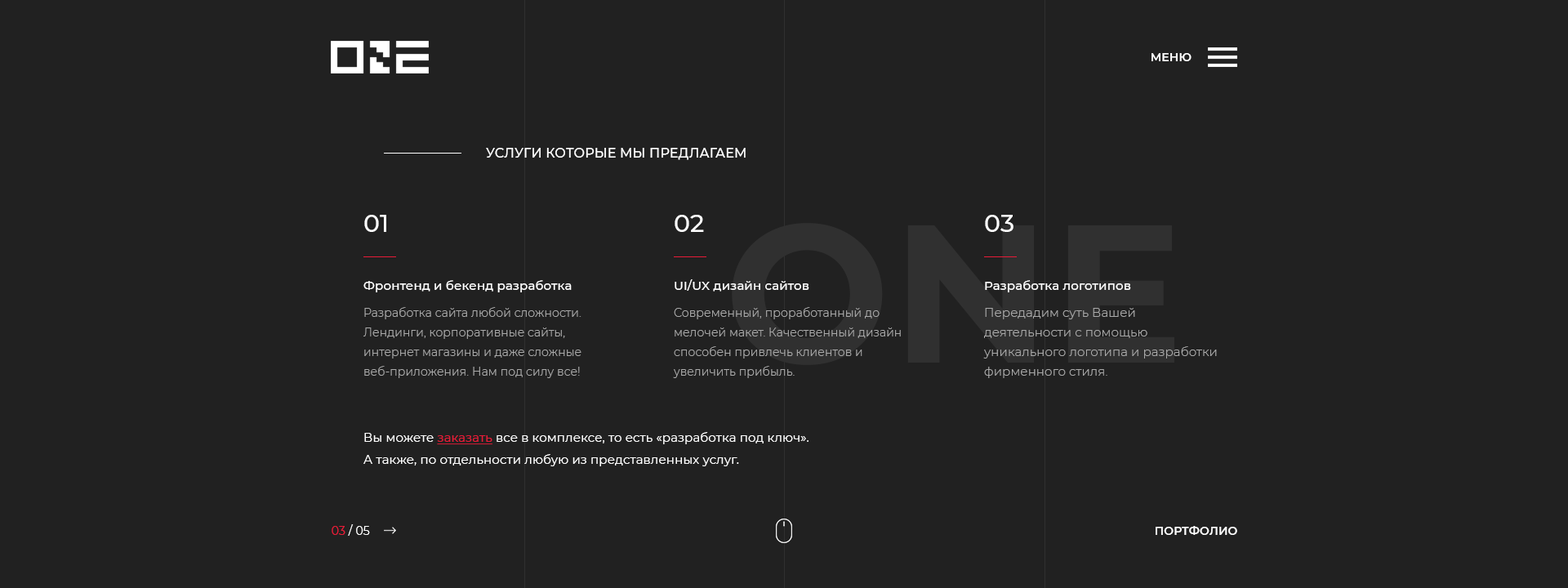
<style>
.page{position:relative;width:1568px;height:588px;background:#212121}
.page>*{position:absolute;margin:0}
.t1{font:11.4px "Montserrat-SemiBold";letter-spacing:0.01em;color:#ffffff}
.t2{font:13.1px "Montserrat-Medium";letter-spacing:0.01em;color:#ffffff}
.t3{font:24.5px "Montserrat-Medium";letter-spacing:0.01em;color:#ffffff}
.t4{font:12.2px "Montserrat-Medium";letter-spacing:0.01em;color:#ffffff}
.t5{font:11.4px/19.6px "Montserrat-Light";letter-spacing:0.01em;color:#ababab}
.t6{font:12.2px/19.6px "Montserrat-Light";letter-spacing:0.01em;color:#ababab}
.t7{font:12.2px/22.1px "Montserrat-Regular";letter-spacing:0.01em;color:#ffffff}
.t8{font:12.2px/22.1px "Montserrat-Regular";letter-spacing:0.01em;color:#e91b38;text-decoration:underline}
.t9{font:11.4px "Montserrat-Regular";letter-spacing:0.01em;color:#ffffff}
.t10{font:11.4px "Montserrat-Regular";letter-spacing:0.01em;color:#e91b38}
</style>
<div class="page">
<p class="t1" style="left:1152px;top:53px;width:40px;height:8px">МЕНЮ</p>
<p class="t2" style="left:486px;top:148px;width:260px;height:12px">УСЛУГИ КОТОРЫЕ МЫ ПРЕДЛАГАЕМ</p>
<p class="t3" style="left:364px;top:215px;width:22px;height:17px">01</p>
<p class="t3" style="left:675px;top:215px;width:29px;height:17px">02</p>
<p class="t3" style="left:985px;top:215px;width:28px;height:17px">03</p>
<p class="t4" style="left:363px;top:280px;width:209px;height:12px">Фронтенд и бекенд разработка</p>
<p class="t4" style="left:675px;top:279px;width:134px;height:13px">UI/UX дизайн сайтов</p>
<p class="t4" style="left:985px;top:280px;width:146px;height:12px">Разработка логотипов</p>
<p class="t5" style="left:363px;top:307px;width:218px;height:71px">Разработка сайта любой сложности. Лендинги, корпоративные сайты, интернет магазины и даже сложные веб-приложения. Нам под силу все!</p>
<p class="t5" style="left:673px;top:307px;width:228px;height:71px">Современный, проработанный до мелочей макет. Качественный дизайн способен привлечь клиентов и увеличить прибыль.</p>
<p class="t6" style="left:983px;top:308px;width:234px;height:70px">Передадим суть Вашей деятельности с помощью уникального логотипа и разработки фирменного стиля.</p>
<p class="t7" style="left:363px;top:432px;width:445px;height:34px">Вы можете <span class="t8">заказать</span> все в комплексе, то есть «разработка под ключ». <br>А также, по отдельности любую из представленных услуг.</p>
<p class="t9" style="left:332px;top:524px;width:38px;height:12px"><span class="t10">03</span> / 05</p>
<p class="t1" style="left:1156px;top:526px;width:81px;height:9px">ПОРТФОЛИО</p>
</div>
